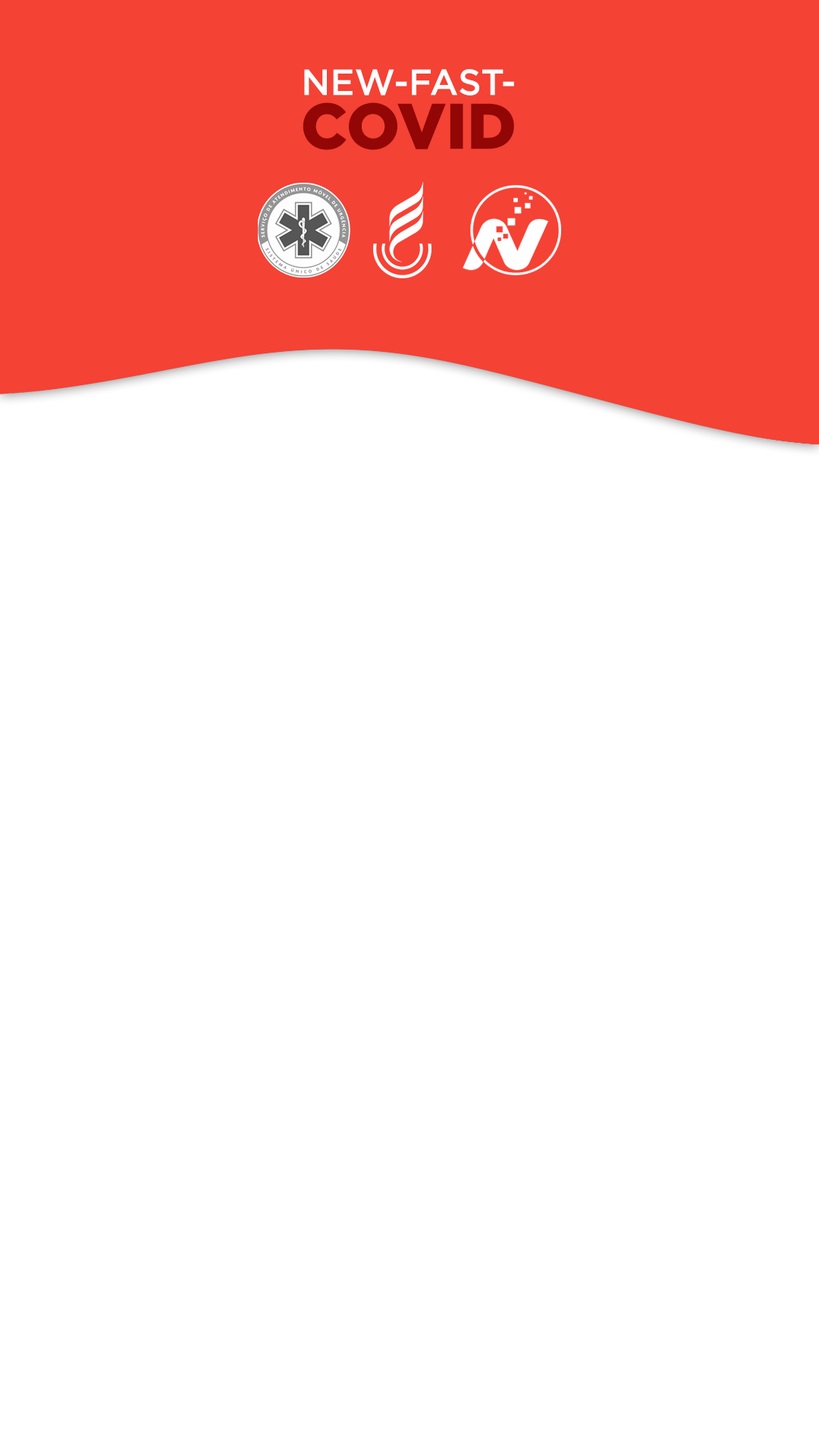
<style>
.page{position:relative;width:819px;height:1456px;background:#ffffff}
.page>*{position:absolute;margin:0}
.t1{font:36.4px/53.8px "Gotham-Medium";color:#ffffff}
.t2{font:64.5px/53.8px "Gotham-Black";color:#930606}
</style>
<div class="page">
<p class="t1" style="left:303px;top:69px;width:211px;height:81px;text-align:center">NEW-FAST-<br><span class="t2">COVID</span></p>
</div>
